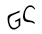
<style>
.page{position:relative;width:42px;height:34px;background:#ffffff}
.page>*{position:absolute;margin:0}
.t1{font:24px "MyriadHebrew-Regular";color:#000000}
</style>
<div class="page">
<p class="t1" style="left:7px;top:5px;width:29px;height:25px">GC</p>
</div>
